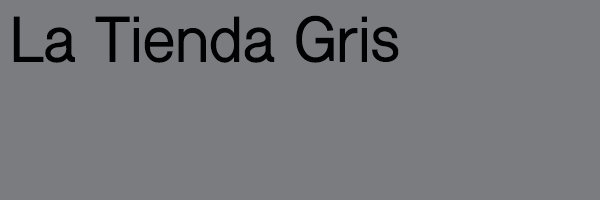
<style>
.page{position:relative;width:600px;height:200px;background:#7a7c7f}
.page>*{position:absolute;margin:0}
.t1{font:60px "ShreeDev0714-Bold";color:#000203}
</style>
<div class="page">
<p class="t1" style="left:13px;top:15px;width:386px;height:48px">La Tienda Gris</p>
</div>
